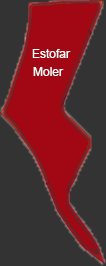
<style>
.page{position:relative;width:106px;height:266px;background:#333333}
.page>*{position:absolute;margin:0}
.t1{font:12px "ArialMT";color:#ffffff}
</style>
<div class="page">
<p class="t1" style="left:32px;top:49px;width:39px;height:9px">Estofar</p>
<p class="t1" style="left:33px;top:67px;width:31px;height:9px">Moler</p>
</div>
